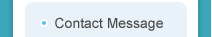
<style>
.page{position:relative;width:212px;height:37px;background:#e9f2f9}
.page>*{position:absolute;margin:0}
.t1{font:14px "ArialMT";color:#494949}
</style>
<div class="page">
<p class="t1" style="left:55px;top:17px;width:108px;height:14px">Contact Message</p>
</div>
